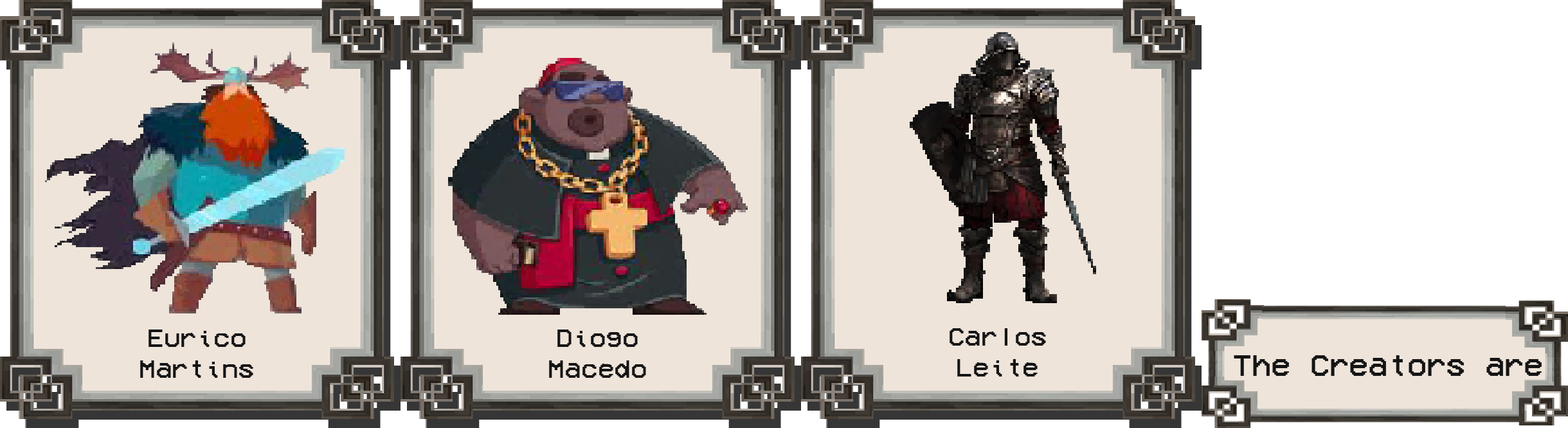
<style>
.page{position:relative;width:1568px;height:428px;background:#eee4da}
.page>*{position:absolute;margin:0}
.t1{font:25.7px "VCROSDMono";color:#141414;scale:1.1 1}
</style>
<div class="page">
<p class="t1" style="left:140px;top:329px;width:113px;height:48px;text-align:center">Eurico<br>Martins</p>
<p class="t1" style="left:549px;top:329px;width:97px;height:48px;text-align:center">Diogo<br>Macedo</p>
<p class="t1" style="left:950px;top:328px;width:96px;height:48px;text-align:center">Carlos<br>Leite</p>
</div>
